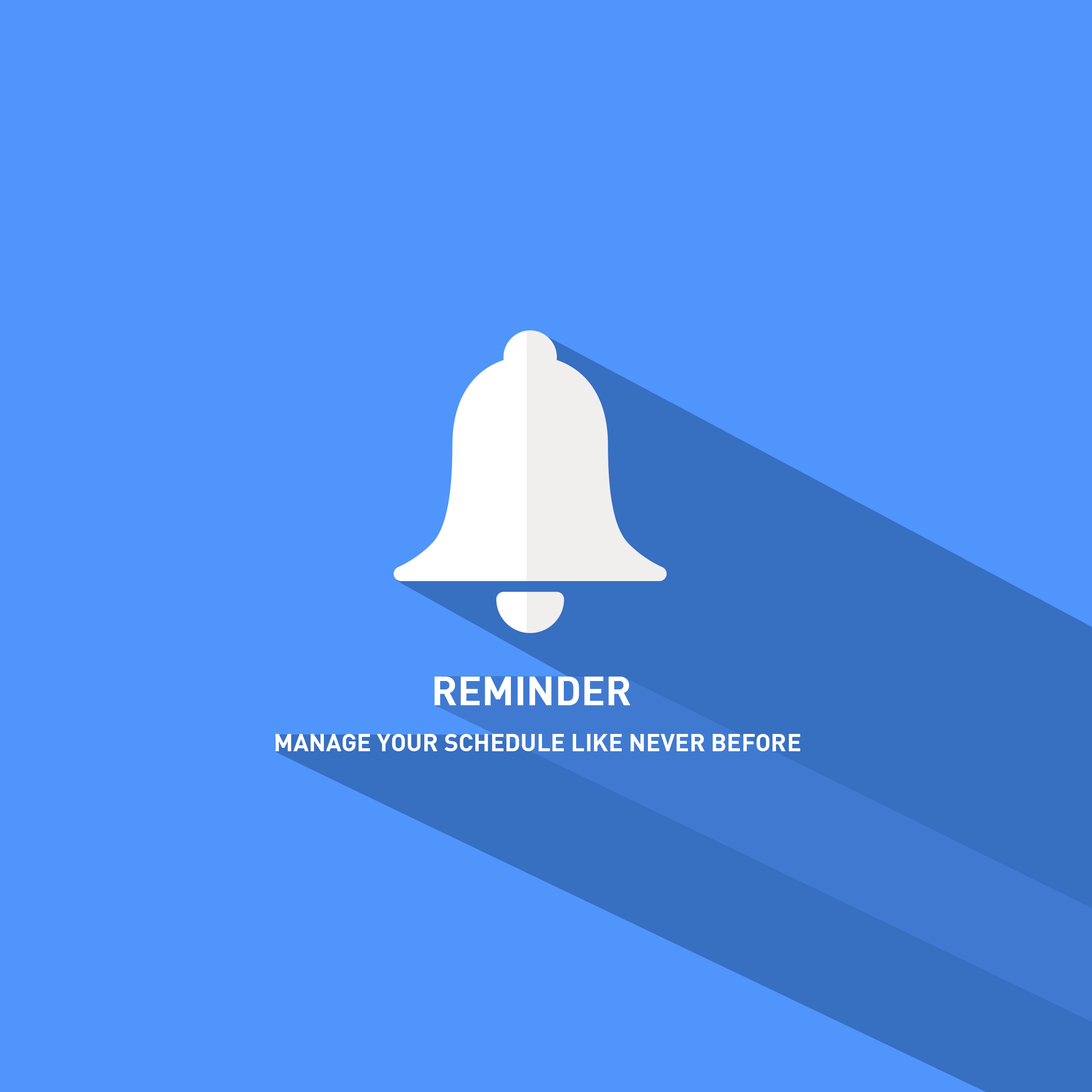
<style>
.page{position:relative;width:1092px;height:1092px;background:#4f95fc}
.page>*{position:absolute;margin:0}
.t1{font:40.1px "DIN-Bold";color:#ffffff}
.t2{font:24.2px "DIN-Bold";color:#ffffff}
</style>
<div class="page">
<p class="t1" style="left:434px;top:677px;width:197px;height:28px">REMINDER</p>
<p class="t2" style="left:275px;top:734px;width:525px;height:17px">MANAGE YOUR SCHEDULE LIKE NEVER BEFORE</p>
</div>
